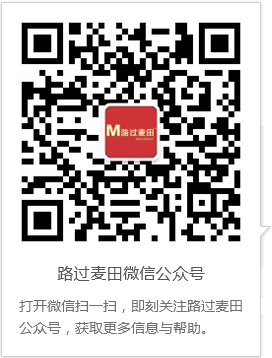
<style>
.page{position:relative;width:272px;height:358px;background:#ffffff}
.page>*{position:absolute;margin:0}
.t1{font:16px "MicrosoftYaHei";letter-spacing:0.025em;color:#555555}
.t2{font:14px/22px "MicrosoftYaHei";color:#707070}
</style>
<div class="page">
<p class="t1" style="left:57px;top:266px;width:148px;height:15px">路过麦田微信公众号</p>
<p class="t2" style="left:19px;top:300px;width:223px;height:35px">打开微信扫一扫，即刻关注路过麦田<br>公众号，获取更多信息与帮助。</p>
</div>
